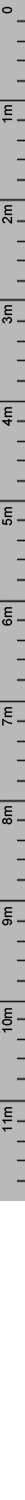
<style>
.page{position:relative;width:25px;height:1500px;background:#b9b9b9}
.page>*{position:absolute;margin:0}
.t1{font:14px "ArialMT";color:#000000}
</style>
<div class="page">
<p class="t1" style="left:2px;top:6px;width:11px;height:8px;rotate:-90deg">0</p>
<p class="t1" style="left:2px;top:105px;width:11px;height:18px;rotate:-90deg">1m</p>
<p class="t1" style="left:2px;top:205px;width:11px;height:19px;rotate:-90deg">2m</p>
<p class="t1" style="left:2px;top:305px;width:11px;height:19px;rotate:-90deg">3m</p>
<p class="t1" style="left:2px;top:407px;width:11px;height:19px;rotate:-90deg">4m</p>
<p class="t1" style="left:2px;top:507px;width:11px;height:19px;rotate:-90deg">5m</p>
<p class="t1" style="left:2px;top:607px;width:11px;height:19px;rotate:-90deg">6m</p>
<p class="t1" style="left:2px;top:707px;width:11px;height:19px;rotate:-90deg">7m</p>
<p class="t1" style="left:2px;top:806px;width:11px;height:19px;rotate:-90deg">8m</p>
<p class="t1" style="left:2px;top:907px;width:11px;height:19px;rotate:-90deg">9m</p>
<p class="t1" style="left:2px;top:1008px;width:11px;height:25px;rotate:-90deg">10m</p>
<p class="t1" style="left:2px;top:1107px;width:11px;height:25px;rotate:-90deg">11m</p>
</div>
